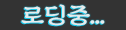
<style>
.page{position:relative;width:126px;height:30px;background:#333333}
.page>*{position:absolute;margin:0}
.t1{font:23.3px "SDKukdetopokki-aLt";color:#faffff;scale:1.08 1}
</style>
<div class="page">
<p class="t1" style="left:21px;top:4px;width:84px;height:22px;opacity:0.9">로딩중...</p>
</div>
